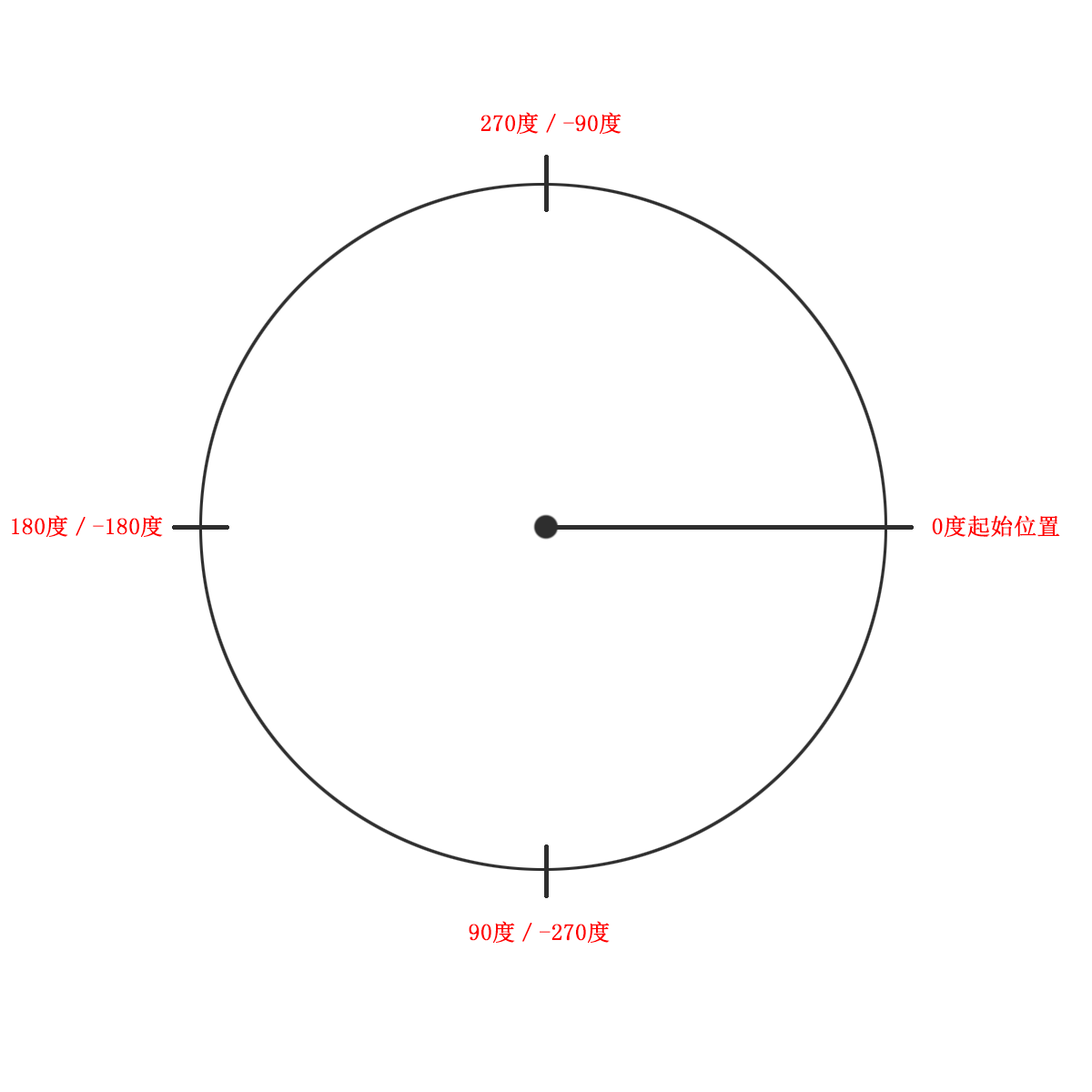
<style>
.page{position:relative;width:1092px;height:1092px;background:#ffffff}
.page>*{position:absolute;margin:0}
.t1{font:22.7px "SimSun";color:#ff0000;font-weight:bold}
</style>
<div class="page">
<p class="t1" style="left:480px;top:112px;width:142px;height:22px">270度／-90度</p>
<p class="t1" style="left:12px;top:515px;width:151px;height:22px">180度／-180度</p>
<p class="t1" style="left:932px;top:515px;width:128px;height:22px">0度起始位置</p>
<p class="t1" style="left:469px;top:921px;width:141px;height:22px">90度／-270度</p>
</div>
